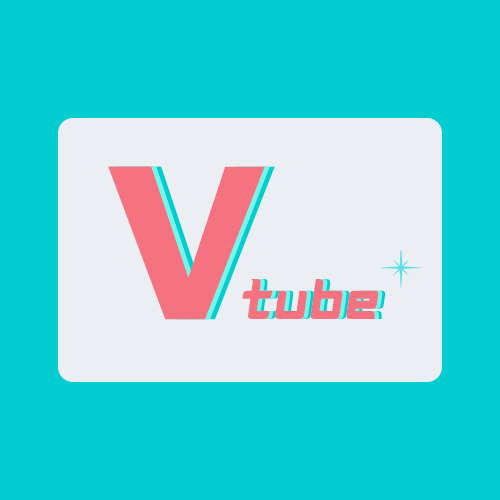
<style>
.page{position:relative;width:500px;height:500px;background:#03cdd1}
.page>*{position:absolute;margin:0}
.t1{font:228.6px "MavenPro-Bold";color:#f67381}
.t2{font:228.6px "MavenPro-Bold";color:#74f7e9}
.t3{font:228.6px "MavenPro-Bold";color:#01ced1}
.t4{font:57.1px "Magz";letter-spacing:0.05em;color:#f67381}
.t5{font:57.1px "Magz";letter-spacing:0.05em;color:#74f7e9}
.t6{font:57.1px "Magz";letter-spacing:0.05em;color:#01ced1}
</style>
<div class="page">
<p class="t1" style="left:108px;top:166px;width:157px;height:154px">V</p>
<p class="t2" style="left:113px;top:166px;width:157px;height:154px">V</p>
<p class="t3" style="left:118px;top:166px;width:157px;height:154px">V</p>
<p class="t4" style="left:242px;top:278px;width:137px;height:41px">Tube</p>
<p class="t5" style="left:246px;top:278px;width:137px;height:41px">Tube</p>
<p class="t6" style="left:249px;top:278px;width:137px;height:41px">Tube</p>
</div>
